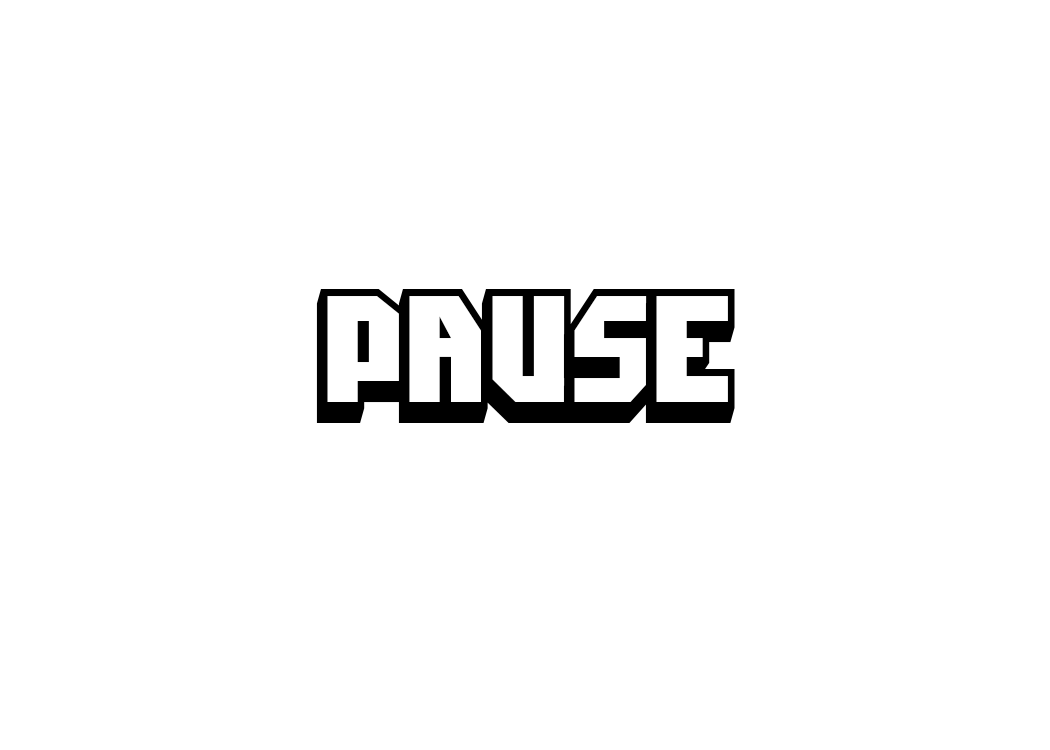
<style>
.page{position:relative;width:1050px;height:750px;background:#ffffff}
.page>*{position:absolute;margin:0}
.t1{font:151.8px "DimitriSwank";color:#000000}
</style>
<div class="page">
<p class="t1" style="left:316px;top:289px;width:419px;height:134px">pause</p>
</div>
